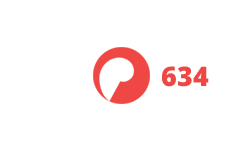
<style>
.page{position:relative;width:225px;height:150px;background:#ffffff}
.page>*{position:absolute;margin:0}
.t1{font:27px "OpenSans-Extrabold";color:#ee4744}
</style>
<div class="page">
<p class="t1" style="left:162px;top:66px;width:47px;height:21px">634</p>
</div>
